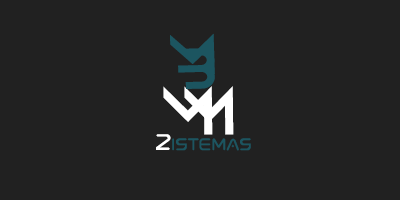
<style>
.page{position:relative;width:400px;height:200px;background:#212121}
.page>*{position:absolute;margin:0}
.t1{font:50.1px "Anurati-Regular";color:#1c5560;scale:1.08 1}
.t2{font:60.5px "Anurati-Regular";color:#ffffff}
.t3{font:27.7px "Spaced-Regular";color:#ffffff}
.t4{font:21.1px "Spaced-Regular";color:#1c5560}
</style>
<div class="page">
<p class="t1" style="left:170px;top:33px;width:45px;height:42px;rotate:-1deg">M</p>
<p class="t1" style="left:177px;top:48px;width:38px;height:41px;rotate:-1deg">B</p>
<p class="t2" style="left:163px;top:86px;width:50px;height:49px;rotate:-1deg">M</p>
<p class="t2" style="left:184px;top:86px;width:50px;height:49px;rotate:-1deg">M</p>
<p class="t3" style="left:156px;top:134px;width:15px;height:16px">2</p>
<p class="t4" style="left:172px;top:138px;width:79px;height:13px">istemas</p>
</div>
